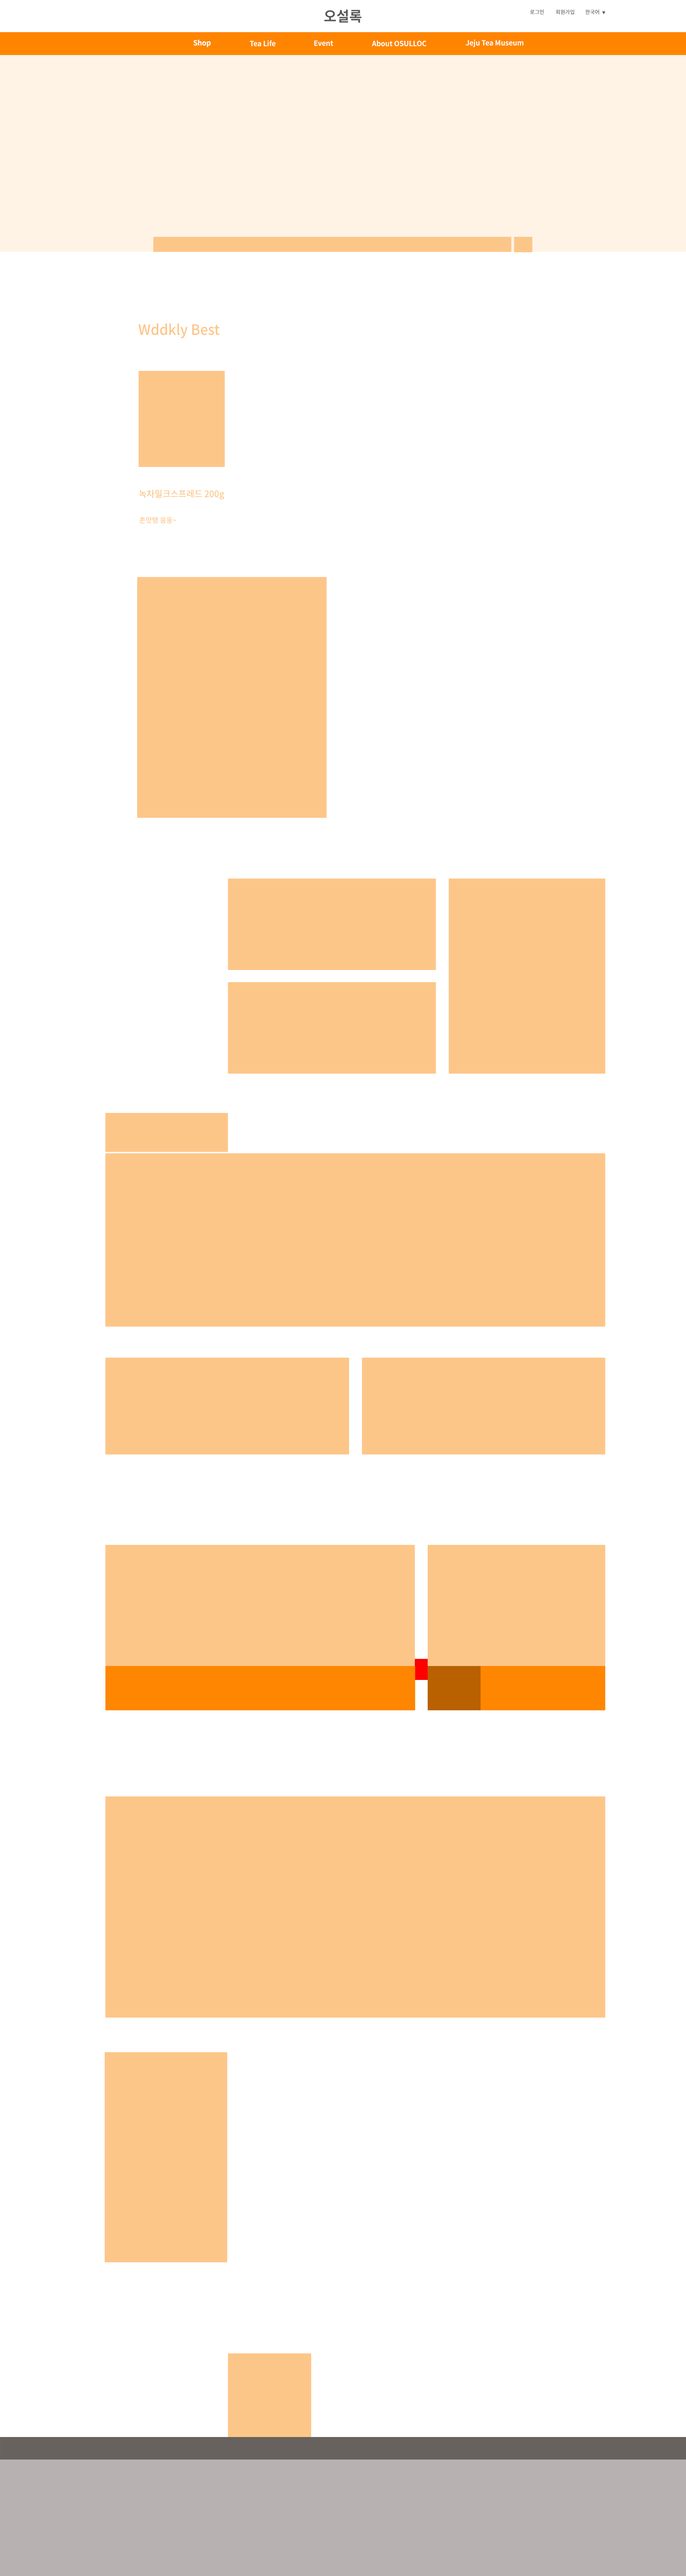
<style>
.page{position:relative;width:686px;height:2576px;background:#ffffff}
.page>*{position:absolute;margin:0}
.t1{font:14.3px "NotoSansKR-Bold";color:#585858;scale:0.97 1}
.t2{font:5.4px "NotoSansKR-Medium";color:#585858;scale:0.97 1}
.t3{font:3.6px "NotoSansKR-Medium";color:#585858;scale:0.97 1}
.t4{font:7.1px "NotoSansKR-Bold";color:#ffffff;scale:0.97 1}
.t5{font:14.3px "NotoSansKR-Medium";color:#fdc689;scale:0.97 1}
.t6{font:8.9px "NotoSansKR-Medium";color:#fdc689;scale:0.97 1}
.t7{font:7.1px "NotoSansKR-Medium";color:#fdc689;scale:0.97 1}
</style>
<div class="page">
<p class="t1" style="left:324px;top:9px;width:38px;height:14px">오설록</p>
<p class="t2" style="left:530px;top:9px;width:14px;height:5px">로그인</p>
<p class="t2" style="left:556px;top:10px;width:18px;height:5px">회원가입</p>
<p class="t2" style="left:585px;top:9px;width:14px;height:6px">한국어</p>
<p class="t3" style="left:602px;top:11px;width:4px;height:3px">▼</p>
<p class="t4" style="left:193px;top:40px;width:18px;height:7px">Shop</p>
<p class="t4" style="left:193px;top:40px;width:18px;height:7px">Shop</p>
<p class="t4" style="left:250px;top:40px;width:25px;height:6px">Tea Life</p>
<p class="t4" style="left:314px;top:40px;width:19px;height:6px">Event</p>
<p class="t4" style="left:372px;top:40px;width:55px;height:6px">About OSULLOC</p>
<p class="t4" style="left:466px;top:40px;width:57px;height:7px">Jeju Tea Museum</p>
<p class="t5" style="left:138px;top:323px;width:82px;height:15px">Wddkly Best</p>
<p class="t6" style="left:139px;top:489px;width:85px;height:10px">녹차밀크스프레드 200g</p>
<p class="t7" style="left:139px;top:517px;width:37px;height:6px">존맛탱 웅웅~</p>
</div>
